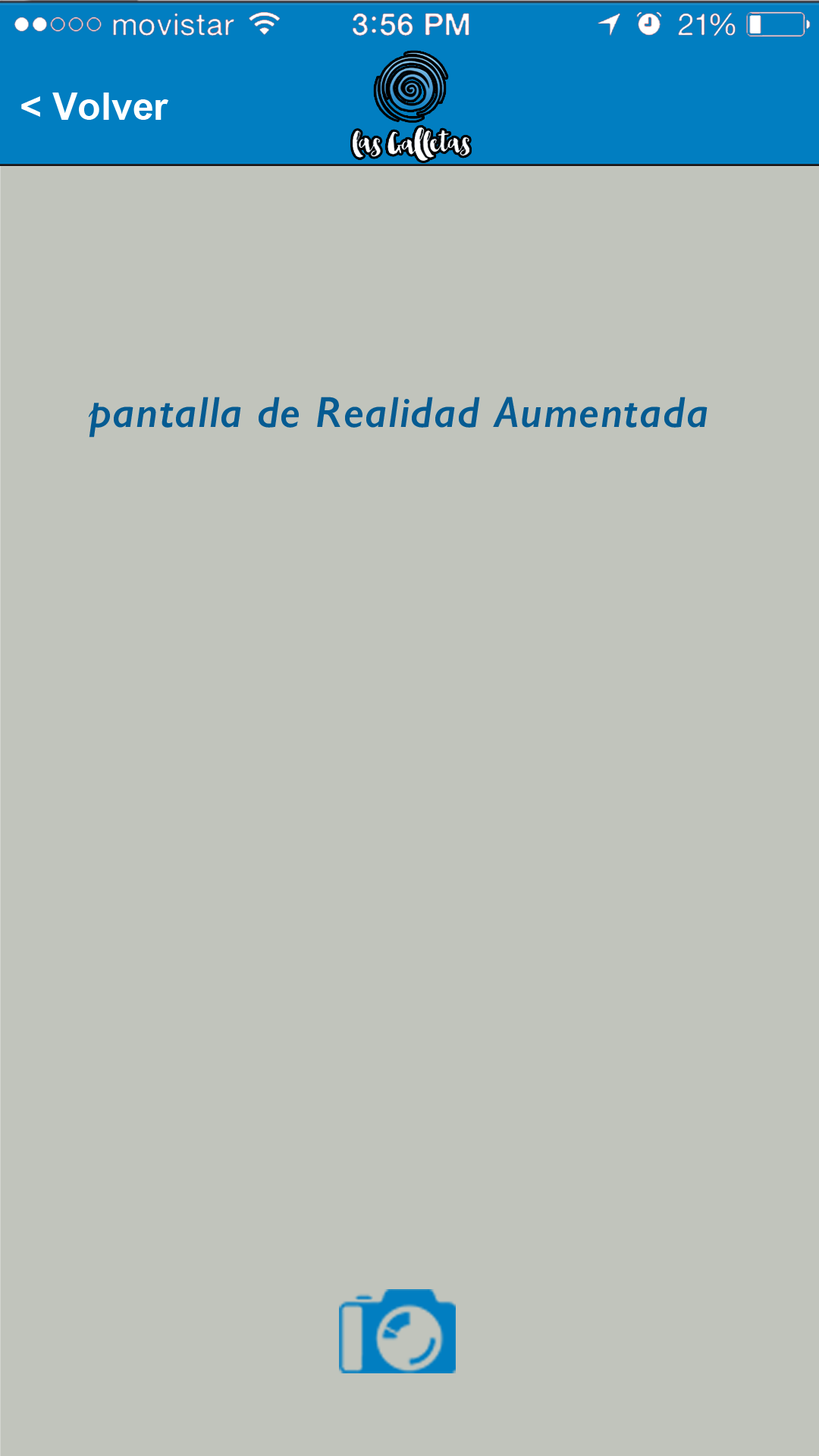
<style>
.page{position:relative;width:819px;height:1456px;background:#c1c4bc}
.page>*{position:absolute;margin:0}
.t1{font:37.9px "Arial-BoldMT";color:#ffffff}
.t2{font:43.7px "GillSans-SemiBoldItalic";letter-spacing:0.025em;color:#055b92}
</style>
<div class="page">
<p class="t1" style="left:21px;top:93px;width:147px;height:27px">&lt; Volver</p>
<p class="t2" style="left:88px;top:397px;width:620px;height:41px">pantalla de Realidad Aumentada</p>
</div>
